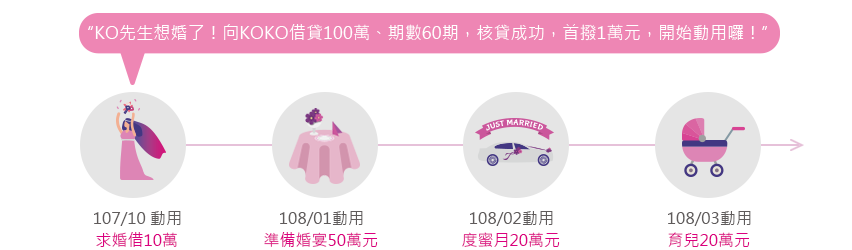
<style>
.page{position:relative;width:852px;height:250px;background:#ffffff}
.page>*{position:absolute;margin:0}
.t1{font:17.2px "MicrosoftJhengHeiRegular";color:#ffffff}
.t2{font:17.2px "MicrosoftJhengHeiRegular";letter-spacing:-0.1em;color:#ffffff}
.t3{font:16px "MicrosoftJhengHeiRegular";color:#5f5b5b}
.t4{font:16px "MicrosoftJhengHeiRegular";color:#db007f}
</style>
<div class="page">
<p class="t1" style="left:88px;top:24px;width:679px;height:17px">“KO先生想婚了！向KOKO借貸100萬、期數60期，核貸成功，首撥1萬元，開始動用囉！<span class="t2">”</span></p>
<p class="t3" style="left:94px;top:211px;width:87px;height:15px">107/10 動用</p>
<p class="t3" style="left:280px;top:211px;width:83px;height:15px">108/01動用</p>
<p class="t3" style="left:470px;top:211px;width:83px;height:15px">108/02動用</p>
<p class="t3" style="left:668px;top:211px;width:83px;height:15px">108/03動用</p>
<p class="t4" style="left:96px;top:232px;width:81px;height:15px">求婚借10萬</p>
<p class="t4" style="left:264px;top:232px;width:114px;height:15px">準備婚宴50萬元</p>
<p class="t4" style="left:462px;top:232px;width:98px;height:15px">度蜜月20萬元</p>
<p class="t4" style="left:668px;top:232px;width:82px;height:15px">育兒20萬元</p>
</div>
